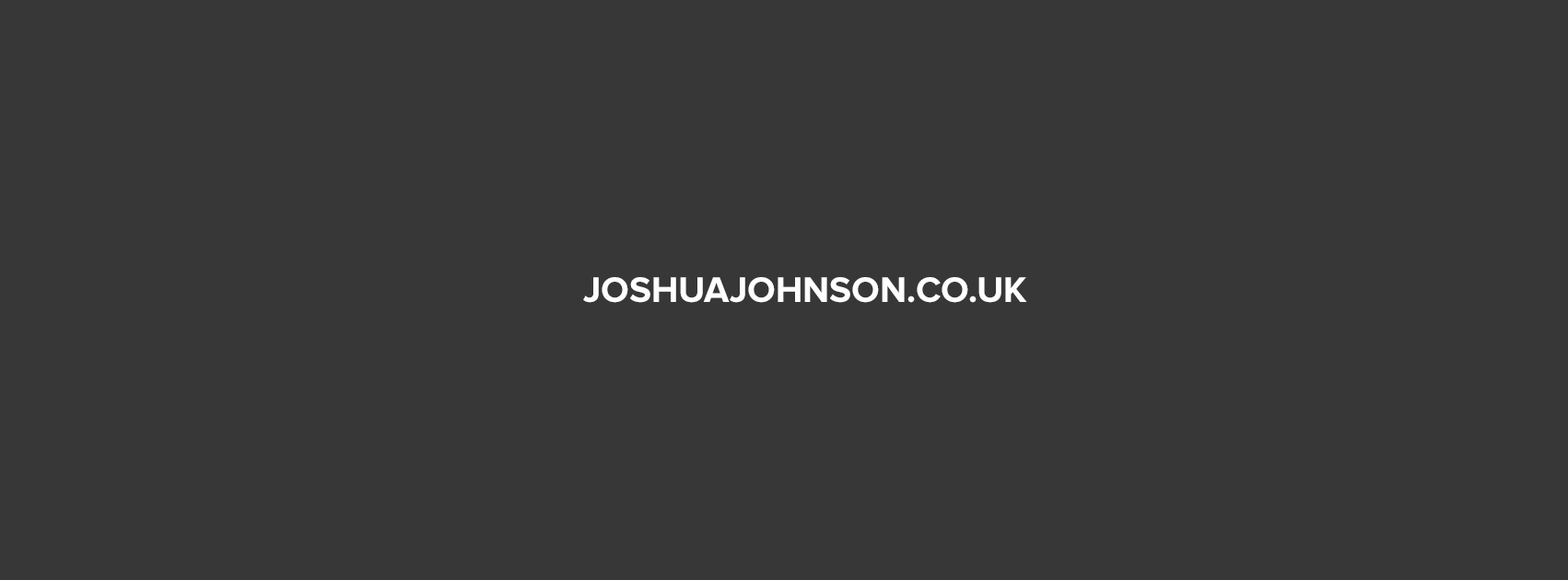
<style>
.page{position:relative;width:1568px;height:580px;background:#383737}
.page>*{position:absolute;margin:0}
.t1{font:36.9px "ProximaNova-Bold";color:#ffffff;text-transform:uppercase}
</style>
<div class="page">
<p class="t1" style="left:583px;top:277px;width:444px;height:26px">joshuajohnson.co.uk</p>
</div>
